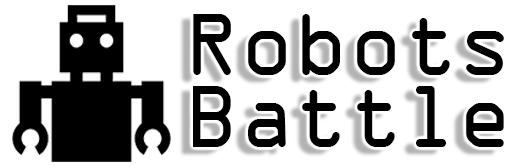
<style>
.page{position:relative;width:532px;height:168px;background:#ffffff}
.page>*{position:absolute;margin:0}
.t1{font:94.1px/72px "OCRAExtended";color:#000000;scale:0.96 1}
</style>
<div class="page">
<p class="t1" style="left:193px;top:14px;width:311px;height:133px">Robots<br>Battle</p>
</div>
